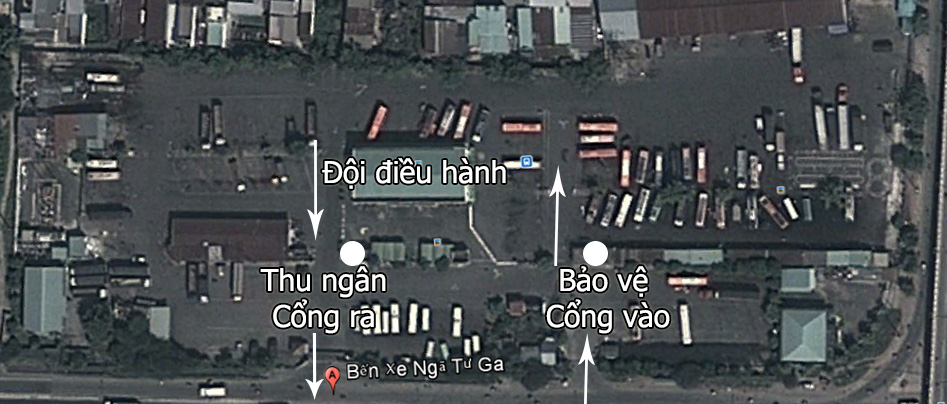
<style>
.page{position:relative;width:947px;height:404px}
.page>*{position:absolute;margin:0}
.t1{font:30px "Tahoma";color:#ffffff}
</style>
<div class="page">
<p class="t1" style="left:322px;top:158px;width:184px;height:31px">Đội điều hành</p>
<p class="t1" style="left:260px;top:266px;width:126px;height:68px;text-align:center">Thu ngân<br>Cổng ra</p>
<p class="t1" style="left:546px;top:266px;width:124px;height:68px;text-align:center">Bảo vệ <br>Cổng vào</p>
</div>
